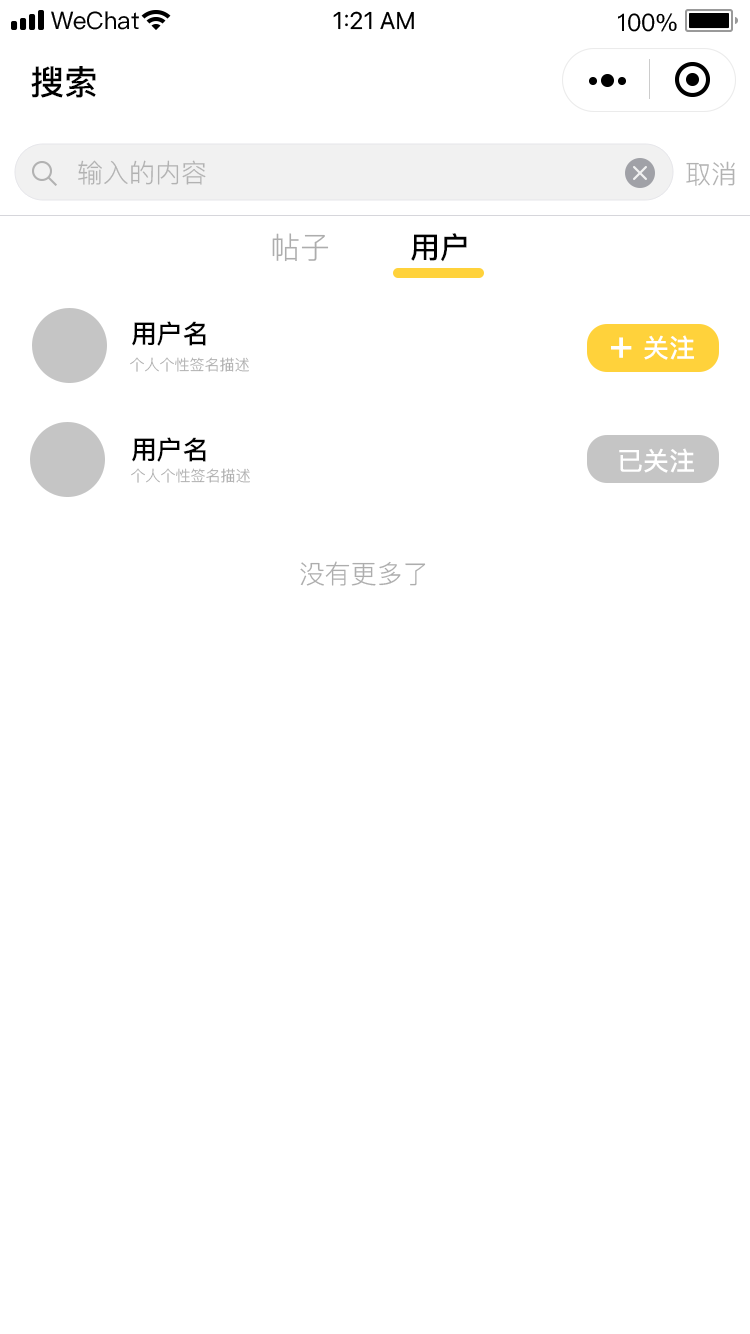
<style>
.page{position:relative;width:750px;height:1334px;background:#ffffff}
.page>*{position:absolute;margin:0}
.t1{font:34px "PingFang-SC-Bold";color:#000000}
.t2{font:26px "PingFangSC-Regular";color:#b2b2b2}
.t3{font:30px "PingFang-SC-Regular";color:#adadad}
.t4{font:30px "PingFang-SC-Bold";color:#000000}
.t5{font:26px "PingFang-SC-Bold";color:#000000}
.t6{font:40px "PingFang-SC-Bold";color:#ffffff}
.t7{font:26px "PingFang-SC-Bold";color:#ffffff}
.t8{font:15px "PingFang-SC-Regular";color:#adadad}
.t9{font:26px "PingFang-SC-Regular";color:#adadad}
</style>
<div class="page">
<p class="t1" style="left:31px;top:66px;width:65px;height:32px">搜索</p>
<p class="t2" style="left:78px;top:160px;width:128px;height:25px">输入的内容</p>
<p class="t2" style="left:686px;top:161px;width:49px;height:25px">取消</p>
<p class="t3" style="left:272px;top:233px;width:57px;height:29px">帖子</p>
<p class="t4" style="left:411px;top:233px;width:56px;height:29px">用户</p>
<p class="t5" style="left:132px;top:321px;width:74px;height:25px">用户名</p>
<p class="t6" style="left:611px;top:337px;width:21px;height:21px">+</p>
<p class="t7" style="left:644px;top:335px;width:50px;height:25px">关注</p>
<p class="t8" style="left:130px;top:357px;width:119px;height:15px">个人个性签名描述</p>
<p class="t5" style="left:132px;top:437px;width:74px;height:25px">用户名</p>
<p class="t7" style="left:619px;top:448px;width:75px;height:25px">已关注</p>
<p class="t8" style="left:131px;top:468px;width:119px;height:15px">个人个性签名描述</p>
<p class="t9" style="left:300px;top:561px;width:126px;height:25px">没有更多了</p>
</div>
